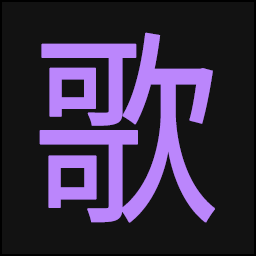
<style>
.page{position:relative;width:256px;height:256px;background:#121212}
.page>*{position:absolute;margin:0}
.t1{font:207px "NotoSansJP-Regular";color:#bb86fc;font-weight:bold;scale:0.9 1}
</style>
<div class="page">
<p class="t1" style="left:39px;top:32px;width:176px;height:191px">歌</p>
</div>
